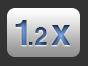
<style>
.page{position:relative;width:88px;height:66px;background:#333333}
.page>*{position:absolute;margin:0}
.t1{font:36px "Helvetica-Bold"}
.t2{font:24px "Helvetica-Bold"}
</style>
<div class="page">
<p class="t1" style="left:15px;top:20px;width:12px;height:25px">1</p>
<p class="t2" style="left:29px;top:27px;width:18px;height:18px">.2</p>
<p class="t1" style="left:51px;top:25px;width:20px;height:20px">x</p>
</div>
